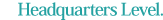
<style>
.page{position:relative;width:163px;height:20px;background:#ffffff}
.page>*{position:absolute;margin:0}
.t1{font:18px "HeiseiMinStd-W7";letter-spacing:-0.04em;color:#25a2a2}
</style>
<div class="page">
<p class="t1" style="left:18px;top:2px;width:145px;height:18px">Headquarters Level.</p>
</div>
